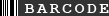
<style>
.page{position:relative;width:109px;height:16px;background:#333333}
.page>*{position:absolute;margin:0}
.t1{font:16.2px "CourierNewPS-BoldMT";letter-spacing:0.17em;color:#ffffff}
</style>
<div class="page">
<p class="t1" style="left:24px;top:4px;width:85px;height:9px">BARCODE</p>
</div>
